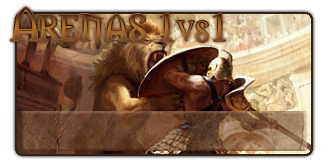
<style>
.page{position:relative;width:328px;height:160px}
.page>*{position:absolute;margin:0}
.t1{font:44.1px "Morpheus"}
.t2{font:33.1px "Morpheus"}
</style>
<div class="page">
<p class="t1" style="left:10px;top:7px;width:216px;height:42px">Arenas 1<span class="t2">vs</span>1</p>
</div>
